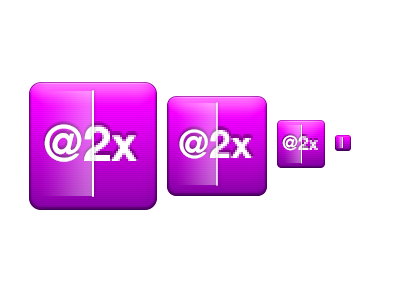
<style>
.page{position:relative;width:400px;height:300px;background:#ffffff}
.page>*{position:absolute;margin:0}
.t1{font:50px "HelveticaNeue-Bold";color:#ffffff}
.t2{font:39.1px "HelveticaNeue-Bold";color:#ffffff}
.t3{font:20px "HelveticaNeue-Bold";color:#ffffff}
</style>
<div class="page">
<p class="t1" style="left:44px;top:124px;width:94px;height:38px">@2x</p>
<p class="t2" style="left:179px;top:129px;width:73px;height:30px">@2x</p>
<p class="t3" style="left:282px;top:135px;width:38px;height:16px">@2x</p>
</div>
